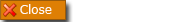
<style>
.page{position:relative;width:185px;height:22px;background:#ffffff}
.page>*{position:absolute;margin:0}
.t1{font:12px "Verdana";color:#fff8f8}
</style>
<div class="page">
<p class="t1" style="left:20px;top:4px;width:32px;height:10px">Close</p>
</div>
